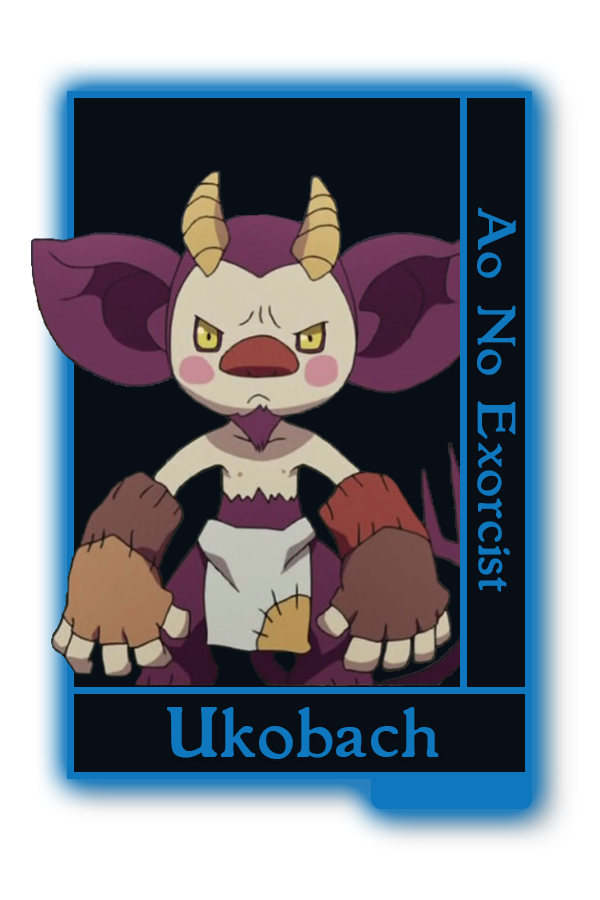
<style>
.page{position:relative;width:600px;height:900px;background:#070e16}
.page>*{position:absolute;margin:0}
.t1{font:48.8px "Grantham-Roman";color:#0f77be}
.t2{font:65.2px "Grantham-Roman";color:#0f77be}
</style>
<div class="page">
<p class="t1" style="left:477px;top:207px;width:39px;height:385px;rotate:90deg">Ao No Exorcist</p>
<p class="t2" style="left:167px;top:707px;width:272px;height:52px">Ukobach</p>
</div>
